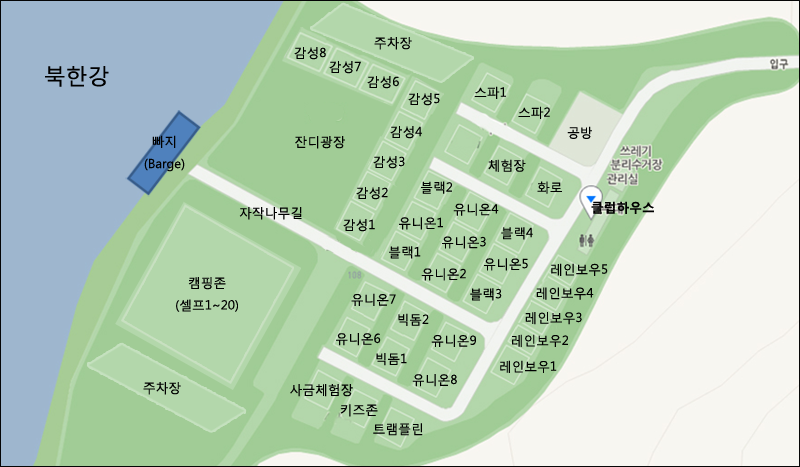
<style>
.page{position:relative;width:800px;height:467px;background:#f7f6f1}
.page>*{position:absolute;margin:0}
.t1{font:12.8px "MalgunGothicRegular";color:#000000}
.t2{font:21.9px "MalgunGothicRegular";color:#000000}
.t3{font:12.8px "MalgunGothicBold";color:#000000}
</style>
<div class="page">
<p class="t1" style="left:374px;top:37px;width:38px;height:13px">주차장</p>
<p class="t1" style="left:294px;top:47px;width:32px;height:13px">감성8</p>
<p class="t1" style="left:329px;top:61px;width:32px;height:13px">감성7</p>
<p class="t2" style="left:45px;top:66px;width:64px;height:21px">북한강</p>
<p class="t1" style="left:367px;top:76px;width:32px;height:13px">감성6</p>
<p class="t1" style="left:474px;top:86px;width:32px;height:13px">스파1</p>
<p class="t1" style="left:408px;top:93px;width:32px;height:13px">감성5</p>
<p class="t1" style="left:518px;top:106px;width:32px;height:13px">스파2</p>
<p class="t1" style="left:390px;top:126px;width:32px;height:13px">감성4</p>
<p class="t1" style="left:567px;top:126px;width:25px;height:13px">공방</p>
<p class="t1" style="left:144px;top:135px;width:41px;height:37px;text-align:center">빠지<br>(Barge)</p>
<p class="t1" style="left:295px;top:136px;width:50px;height:13px">잔디광장</p>
<p class="t1" style="left:373px;top:156px;width:32px;height:13px">감성3</p>
<p class="t1" style="left:488px;top:159px;width:38px;height:13px">체험장</p>
<p class="t1" style="left:421px;top:181px;width:31px;height:13px">블랙2</p>
<p class="t1" style="left:537px;top:181px;width:25px;height:13px">화로</p>
<p class="t1" style="left:356px;top:187px;width:32px;height:13px">감성2</p>
<p class="t1" style="left:239px;top:207px;width:63px;height:13px">자작나무길</p>
<p class="t1" style="left:453px;top:203px;width:46px;height:13px">유니온4</p>
<p class="t3" style="left:591px;top:201px;width:63px;height:13px">클럽하우스</p>
<p class="t1" style="left:343px;top:219px;width:32px;height:13px">감성1</p>
<p class="t1" style="left:399px;top:217px;width:44px;height:13px">유니온1</p>
<p class="t1" style="left:501px;top:227px;width:32px;height:13px">블랙4</p>
<p class="t1" style="left:389px;top:246px;width:32px;height:13px">블랙1</p>
<p class="t1" style="left:442px;top:236px;width:44px;height:13px">유니온3</p>
<p class="t1" style="left:421px;top:268px;width:45px;height:13px">유니온2</p>
<p class="t1" style="left:484px;top:258px;width:44px;height:13px">유니온5</p>
<p class="t1" style="left:551px;top:263px;width:57px;height:13px">레인보우5</p>
<p class="t1" style="left:176px;top:277px;width:62px;height:35px;text-align:center">캠핑존<br>(셀프1~20)</p>
<p class="t1" style="left:351px;top:293px;width:45px;height:13px">유니온7</p>
<p class="t1" style="left:470px;top:288px;width:32px;height:13px">블랙3</p>
<p class="t1" style="left:536px;top:287px;width:58px;height:13px">레인보우4</p>
<p class="t1" style="left:398px;top:313px;width:31px;height:13px">빅돔2</p>
<p class="t1" style="left:525px;top:312px;width:57px;height:13px">레인보우3</p>
<p class="t1" style="left:336px;top:333px;width:45px;height:13px">유니온6</p>
<p class="t1" style="left:431px;top:334px;width:45px;height:13px">유니온9</p>
<p class="t1" style="left:512px;top:334px;width:56px;height:13px">레인보우2</p>
<p class="t1" style="left:376px;top:353px;width:31px;height:13px">빅돔1</p>
<p class="t1" style="left:500px;top:360px;width:57px;height:13px">레인보우1</p>
<p class="t1" style="left:412px;top:374px;width:45px;height:13px">유니온8</p>
<p class="t1" style="left:143px;top:382px;width:38px;height:13px">주차장</p>
<p class="t1" style="left:290px;top:384px;width:63px;height:13px">사금체험장</p>
<p class="t1" style="left:340px;top:404px;width:38px;height:13px">키즈존</p>
<p class="t1" style="left:373px;top:423px;width:50px;height:13px">트램플린</p>
</div>
